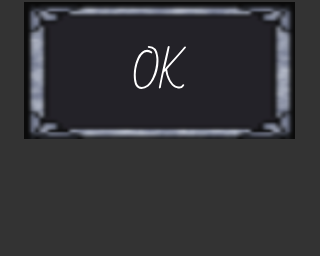
<style>
.page{position:relative;width:320px;height:256px;background:#333333}
.page>*{position:absolute;margin:0}
.t1{font:43px "BadScript-Regular";color:#ffffff}
</style>
<div class="page">
<p class="t1" style="left:133px;top:46px;width:53px;height:43px">ОК</p>
</div>
